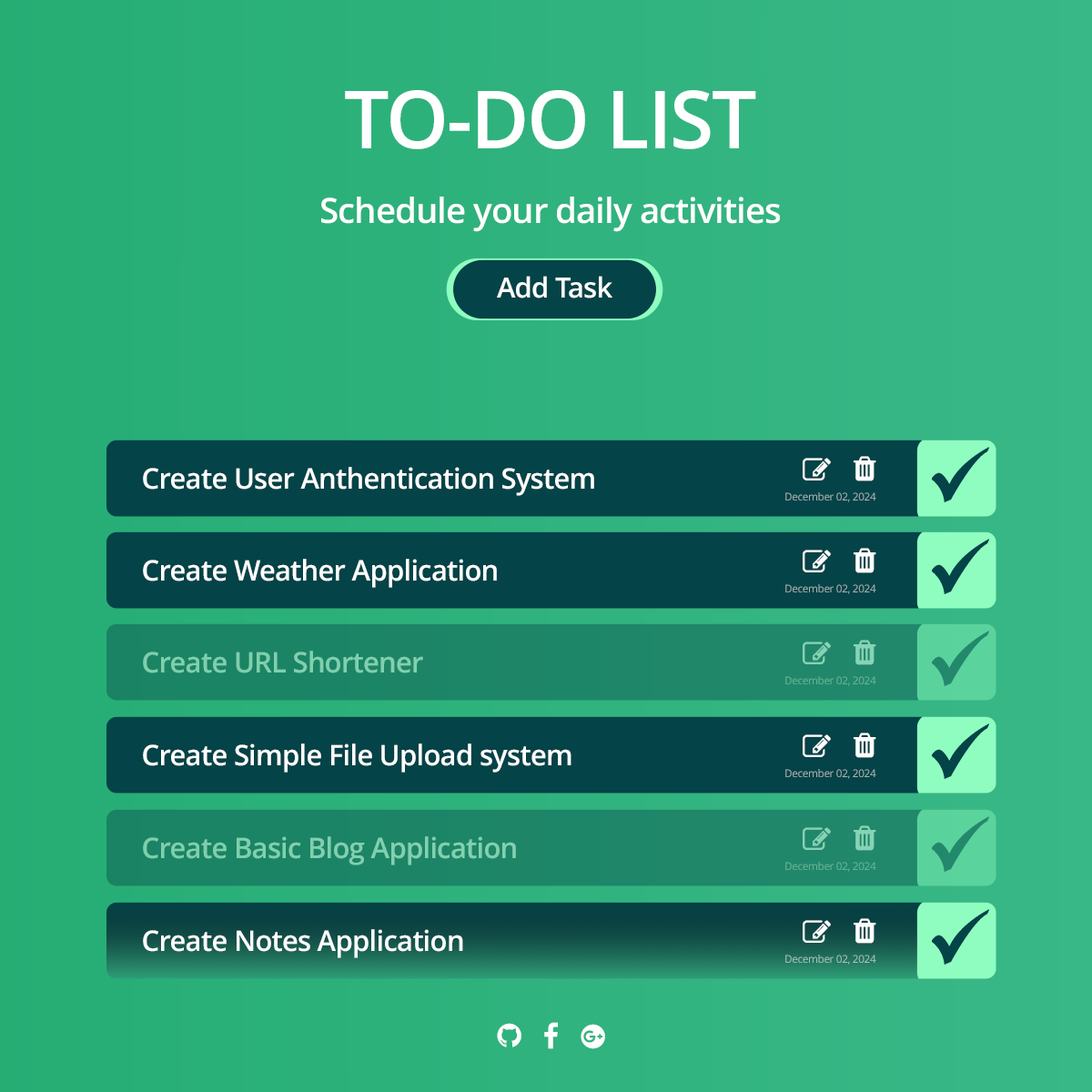
<style>
.page{position:relative;width:1092px;height:1092px}
.page>*{position:absolute;margin:0}
.t1{font:80.2px "OpenSans-Semibold";letter-spacing:-0.025em;color:#ffffff;text-transform:uppercase}
.t2{font:34.9px "OpenSans-Semibold";letter-spacing:-0.025em;color:#ffffff}
.t3{font:28px "OpenSans-Semibold";letter-spacing:-0.025em;color:#ffffff}
.t4{font:28.5px "OpenSans-Semibold";letter-spacing:-0.025em;color:#ffffff}
.t5{font:10.7px "OpenSans";letter-spacing:-0.025em;color:#a4b2b3}
.t6{font:28.5px "OpenSans-Semibold";letter-spacing:-0.025em;color:#7fd0af}
.t7{font:10.7px "OpenSans";letter-spacing:-0.025em;color:#61b496}
.t8{font:28.5px "OpenSans-Semibold";letter-spacing:-0.025em;color:#80d0af}
.t9{font:10.7px "OpenSans";letter-spacing:-0.025em;color:#a9c3bb}
</style>
<div class="page">
<p class="t1" style="left:345px;top:90px;width:411px;height:59px">to-do list</p>
<p class="t2" style="left:321px;top:197px;width:459px;height:35px">Schedule your daily activities</p>
<p class="t3" style="left:497px;top:276px;width:115px;height:22px">Add Task</p>
<p class="t4" style="left:143px;top:467px;width:451px;height:29px">Create User Anthentication System</p>
<p class="t5" style="left:785px;top:492px;width:91px;height:10px">December 02, 2024</p>
<p class="t4" style="left:143px;top:559px;width:354px;height:29px">Create Weather Application</p>
<p class="t5" style="left:785px;top:584px;width:91px;height:10px">December 02, 2024</p>
<p class="t6" style="left:143px;top:651px;width:280px;height:22px">Create URL Shortener</p>
<p class="t7" style="left:785px;top:676px;width:91px;height:10px">December 02, 2024</p>
<p class="t4" style="left:143px;top:743px;width:428px;height:30px">Create Simple File Upload system</p>
<p class="t5" style="left:785px;top:769px;width:91px;height:10px">December 02, 2024</p>
<p class="t8" style="left:143px;top:836px;width:373px;height:29px">Create Basic Blog Application</p>
<p class="t7" style="left:785px;top:862px;width:91px;height:10px">December 02, 2024</p>
<p class="t4" style="left:143px;top:929px;width:320px;height:29px">Create Notes Application</p>
<p class="t9" style="left:785px;top:955px;width:91px;height:10px">December 02, 2024</p>
</div>
